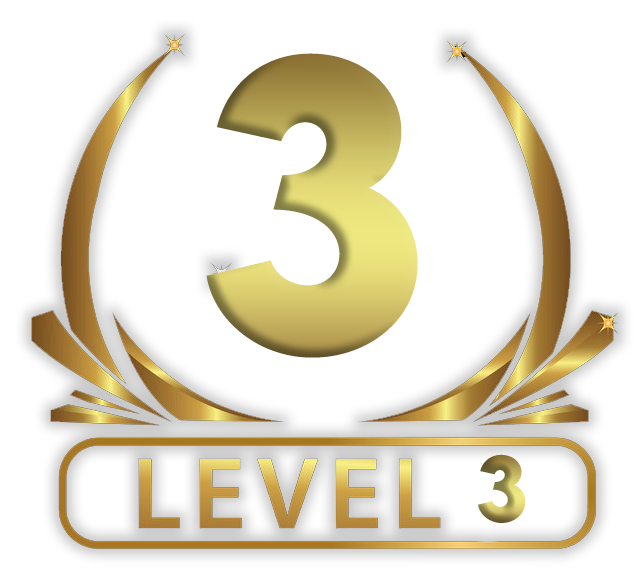
<style>
.page{position:relative;width:636px;height:583px;background:#ffffff}
.page>*{position:absolute;margin:0}
.t1{font:368.6px "LEMONMILK-Bold"}
.t2{font:82.7px "LEMONMILK-Bold"}
</style>
<div class="page">
<p class="t1" style="left:206px;top:53px;width:212px;height:305px">3</p>
<p class="t2" style="left:478px;top:454px;width:48px;height:69px">3</p>
</div>
